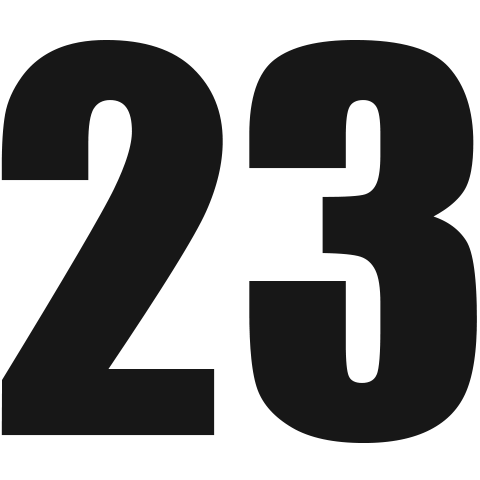
<style>
.page{position:relative;width:480px;height:480px;background:#171717}
.page>*{position:absolute;margin:0}
.t1{font:490.3px "Impact";color:#171717}
</style>
<div class="page">
<p class="t1" style="left:1px;top:40px;width:476px;height:403px">23</p>
</div>
